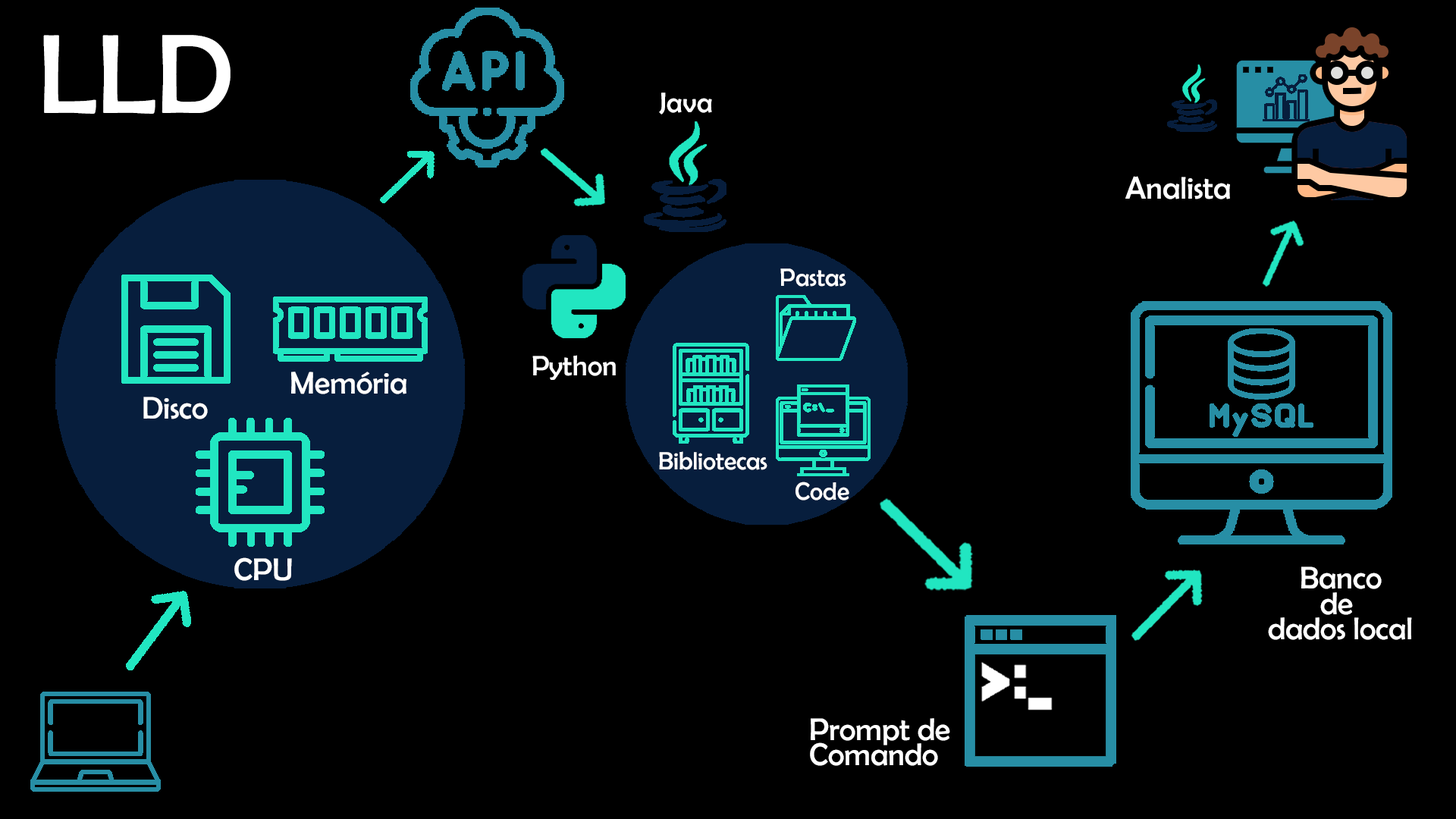
<style>
.page{position:relative;width:1456px;height:819px;background:#000000}
.page>*{position:absolute;margin:0}
.t1{font:113.7px "BerlinSansFB-Reg";color:#ffffff}
.t2{font:28.4px "BerlinSansFB-Reg";color:#ffffff}
.t3{font:31.6px "BerlinSansFB-Reg";color:#ffffff}
.t4{font:25.3px "BerlinSansFB-Reg";color:#ffffff}
.t5{font:31.6px/25.3px "BerlinSansFB-Reg";color:#ffffff}
</style>
<div class="page">
<p class="t1" style="left:43px;top:35px;width:188px;height:79px">LLD</p>
<p class="t2" style="left:659px;top:93px;width:53px;height:22px">Java</p>
<p class="t3" style="left:1125px;top:176px;width:105px;height:23px">Analista</p>
<p class="t4" style="left:780px;top:268px;width:66px;height:19px">Pastas</p>
<p class="t2" style="left:532px;top:355px;width:84px;height:25px">Python</p>
<p class="t3" style="left:291px;top:372px;width:115px;height:22px">Memória</p>
<p class="t3" style="left:143px;top:397px;width:65px;height:22px">Disco</p>
<p class="t4" style="left:659px;top:451px;width:108px;height:19px">Bibliotecas</p>
<p class="t4" style="left:795px;top:482px;width:54px;height:18px">Code</p>
<p class="t3" style="left:234px;top:557px;width:58px;height:24px">CPU</p>
<p class="t5" style="left:1268px;top:566px;width:144px;height:74px;text-align:center">Banco<br>de <br>dados local</p>
<p class="t5" style="left:810px;top:718px;width:140px;height:48px">Prompt de <br>Comando</p>
</div>
